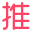
<style>
.page{position:relative;width:32px;height:32px;background:#ffffff}
.page>*{position:absolute;margin:0}
.t1{font:30px "RTWSYueRoudGoDemo-Regular";color:#fe4365;text-transform:uppercase}
</style>
<div class="page">
<p class="t1" style="left:2px;top:2px;width:28px;height:28px">推</p>
</div>
